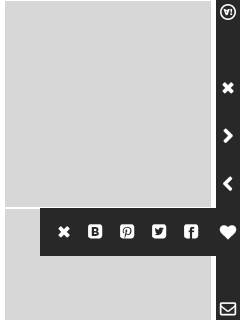
<style>
.page{position:relative;width:240px;height:320px;background:#d7d7d7}
.page>*{position:absolute;margin:0}
.t1{font:12px "HelveticaNeueCyr-Heavy";color:#282828}
</style>
<div class="page">
<p class="t1" style="left:91px;top:227px;width:8px;height:9px">В</p>
</div>
